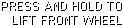
<style>
.page{position:relative;width:123px;height:26px;background:#ffffff}
.page>*{position:absolute;margin:0}
.t1{font:12px "Geneva";color:#000000}
</style>
<div class="page">
<p class="t1" style="left:2px;top:2px;width:120px;height:23px;text-align:right">PRESS AND HOLD TO<br>LIFT FRONT WHEEL</p>
</div>
